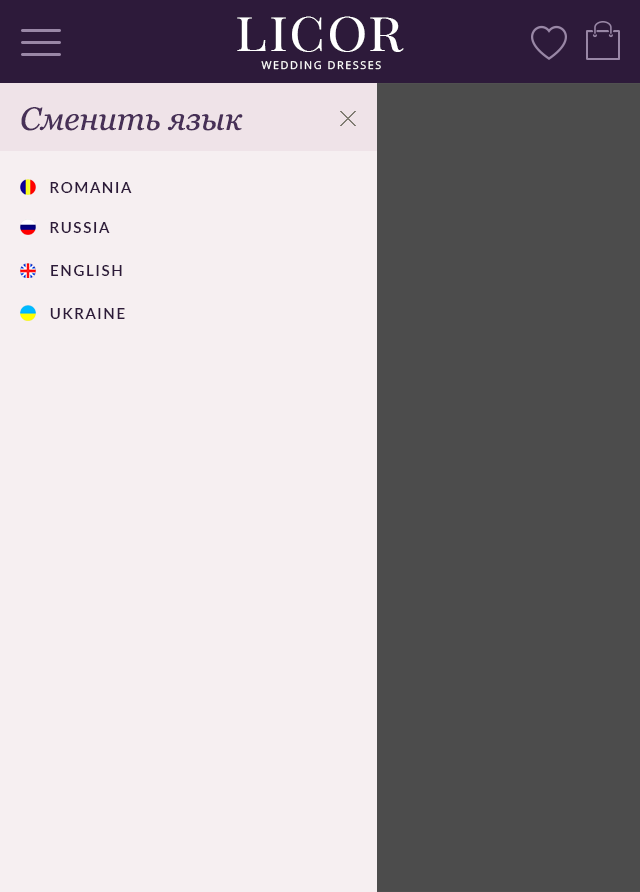
<style>
.page{position:relative;width:640px;height:892px;background:#f6eff1}
.page>*{position:absolute;margin:0}
.t1{font:55.3px "PlayfairDisplaySC-Regular";letter-spacing:0.03em;color:#ffffff}
.t2{font:10.6px "OpenSans";letter-spacing:0.15em;color:#ffffff}
.t3{font:32px "Georgia-Italic";color:#473057}
.t4{font:15px "Lato-Semibold";letter-spacing:0.12em;color:#2d1a3a;text-transform:uppercase}
</style>
<div class="page">
<p class="t1" style="left:237px;top:16px;width:167px;height:36px">licor</p>
<p class="t2" style="left:261px;top:61px;width:120px;height:9px">WEDDING DRESSES</p>
<p class="t3" style="left:21px;top:107px;width:222px;height:24px">Сменить язык</p>
<p class="t4" style="left:50px;top:182px;width:82px;height:11px">romania</p>
<p class="t4" style="left:50px;top:222px;width:60px;height:11px">russia</p>
<p class="t4" style="left:51px;top:265px;width:71px;height:11px">english</p>
<p class="t4" style="left:50px;top:308px;width:75px;height:11px">ukraine</p>
</div>
